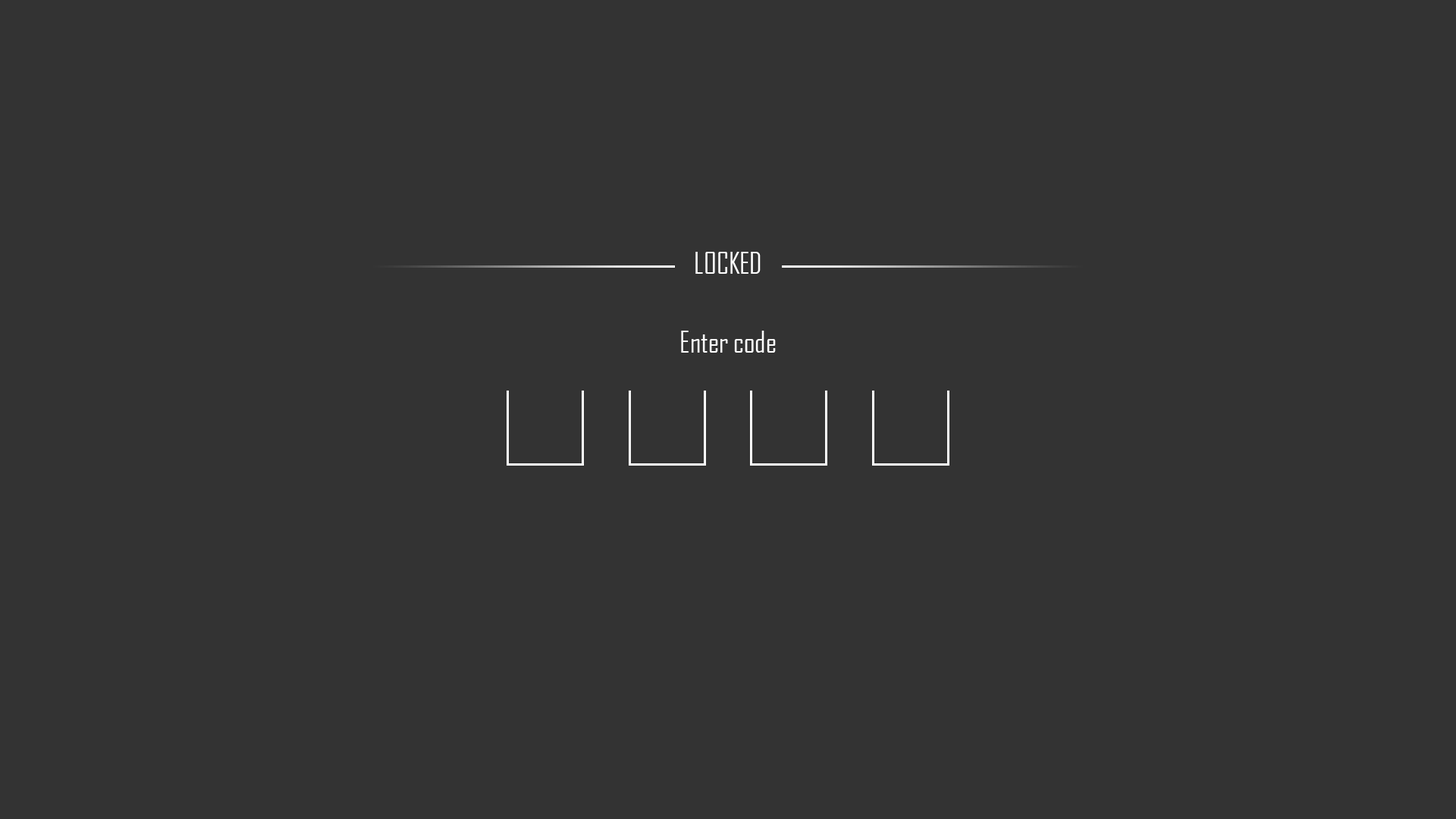
<style>
.page{position:relative;width:1456px;height:819px;background:#333333}
.page>*{position:absolute;margin:0}
.t1{font:28.4px "AgencyFB-Reg";color:#ffffff}
</style>
<div class="page">
<p class="t1" style="left:695px;top:252px;width:66px;height:22px">LOCKED</p>
<p class="t1" style="left:681px;top:331px;width:95px;height:22px">Enter code</p>
</div>
